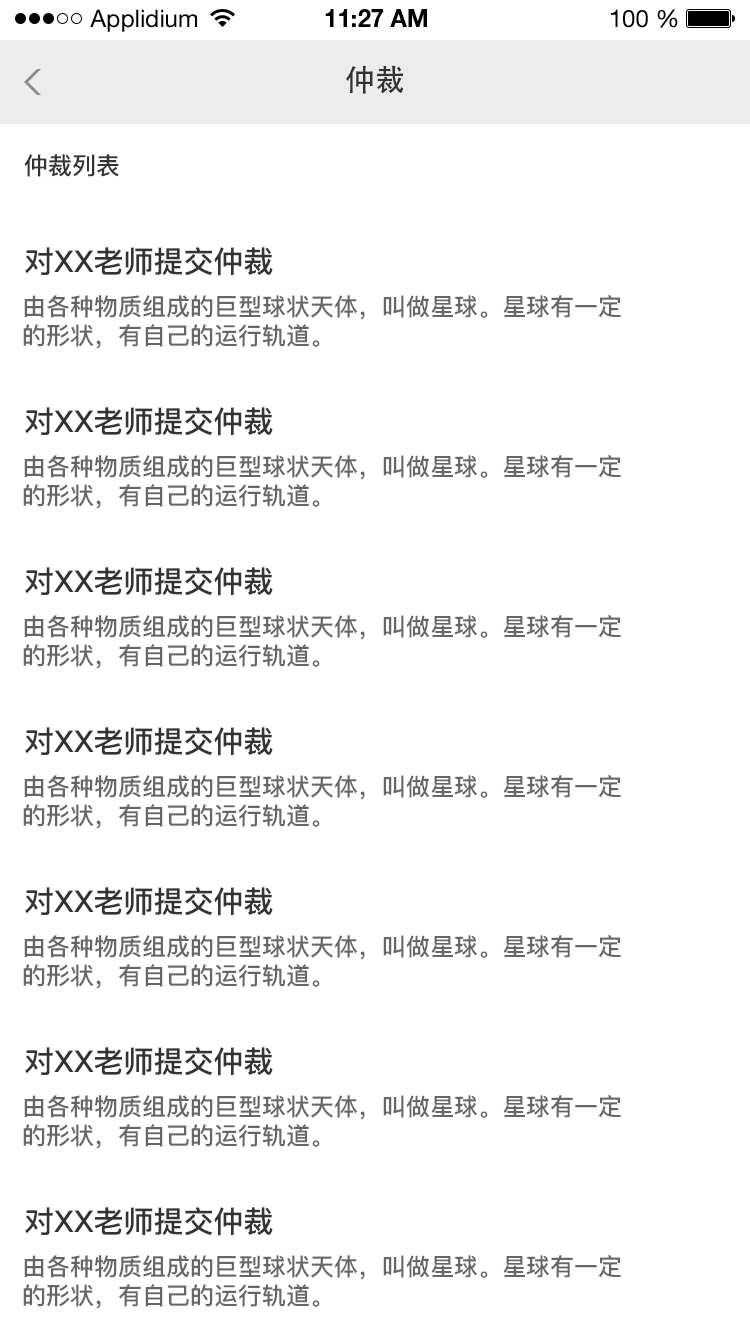
<style>
.page{position:relative;width:750px;height:1334px;background:#ffffff}
.page>*{position:absolute;margin:0}
.t1{font:24px "HelveticaNeueLTStd-Roman";color:#000000}
.t2{font:24px "HelveticaNeueLTStd-Bd";color:#000000}
.t3{font:30px "AdobeHeitiStd-Regular";color:#333333}
.t4{font:24px "PingFang-SC-Bold";color:#333333}
.t5{font:30px "PingFang-SC-Bold";color:#333333}
.t6{font:24px "PingFang-SC-Bold";color:#666666}
</style>
<div class="page">
<p class="t1" style="left:90px;top:9px;width:107px;height:23px">Applidium</p>
<p class="t2" style="left:325px;top:9px;width:102px;height:18px">11:27 AM</p>
<p class="t1" style="left:611px;top:9px;width:67px;height:19px">100 %</p>
<p class="t3" style="left:346px;top:65px;width:58px;height:29px">仲裁</p>
<p class="t4" style="left:24px;top:154px;width:95px;height:23px">仲裁列表</p>
<p class="t5" style="left:25px;top:247px;width:248px;height:29px">对XX老师提交仲裁</p>
<p class="t6" style="left:23px;top:295px;width:598px;height:54px">由各种物质组成的巨型球状天体，叫做星球。星球有一定<br>的形状，有自己的运行轨道。</p>
<p class="t5" style="left:25px;top:407px;width:248px;height:29px">对XX老师提交仲裁</p>
<p class="t6" style="left:23px;top:455px;width:598px;height:54px">由各种物质组成的巨型球状天体，叫做星球。星球有一定<br>的形状，有自己的运行轨道。</p>
<p class="t5" style="left:25px;top:567px;width:248px;height:29px">对XX老师提交仲裁</p>
<p class="t6" style="left:23px;top:615px;width:598px;height:54px">由各种物质组成的巨型球状天体，叫做星球。星球有一定<br>的形状，有自己的运行轨道。</p>
<p class="t5" style="left:25px;top:727px;width:248px;height:29px">对XX老师提交仲裁</p>
<p class="t6" style="left:23px;top:775px;width:598px;height:54px">由各种物质组成的巨型球状天体，叫做星球。星球有一定<br>的形状，有自己的运行轨道。</p>
<p class="t5" style="left:25px;top:887px;width:248px;height:29px">对XX老师提交仲裁</p>
<p class="t6" style="left:23px;top:935px;width:598px;height:54px">由各种物质组成的巨型球状天体，叫做星球。星球有一定<br>的形状，有自己的运行轨道。</p>
<p class="t5" style="left:25px;top:1047px;width:248px;height:29px">对XX老师提交仲裁</p>
<p class="t6" style="left:23px;top:1095px;width:598px;height:54px">由各种物质组成的巨型球状天体，叫做星球。星球有一定<br>的形状，有自己的运行轨道。</p>
<p class="t5" style="left:25px;top:1207px;width:248px;height:29px">对XX老师提交仲裁</p>
<p class="t6" style="left:23px;top:1255px;width:598px;height:54px">由各种物质组成的巨型球状天体，叫做星球。星球有一定<br>的形状，有自己的运行轨道。</p>
</div>
